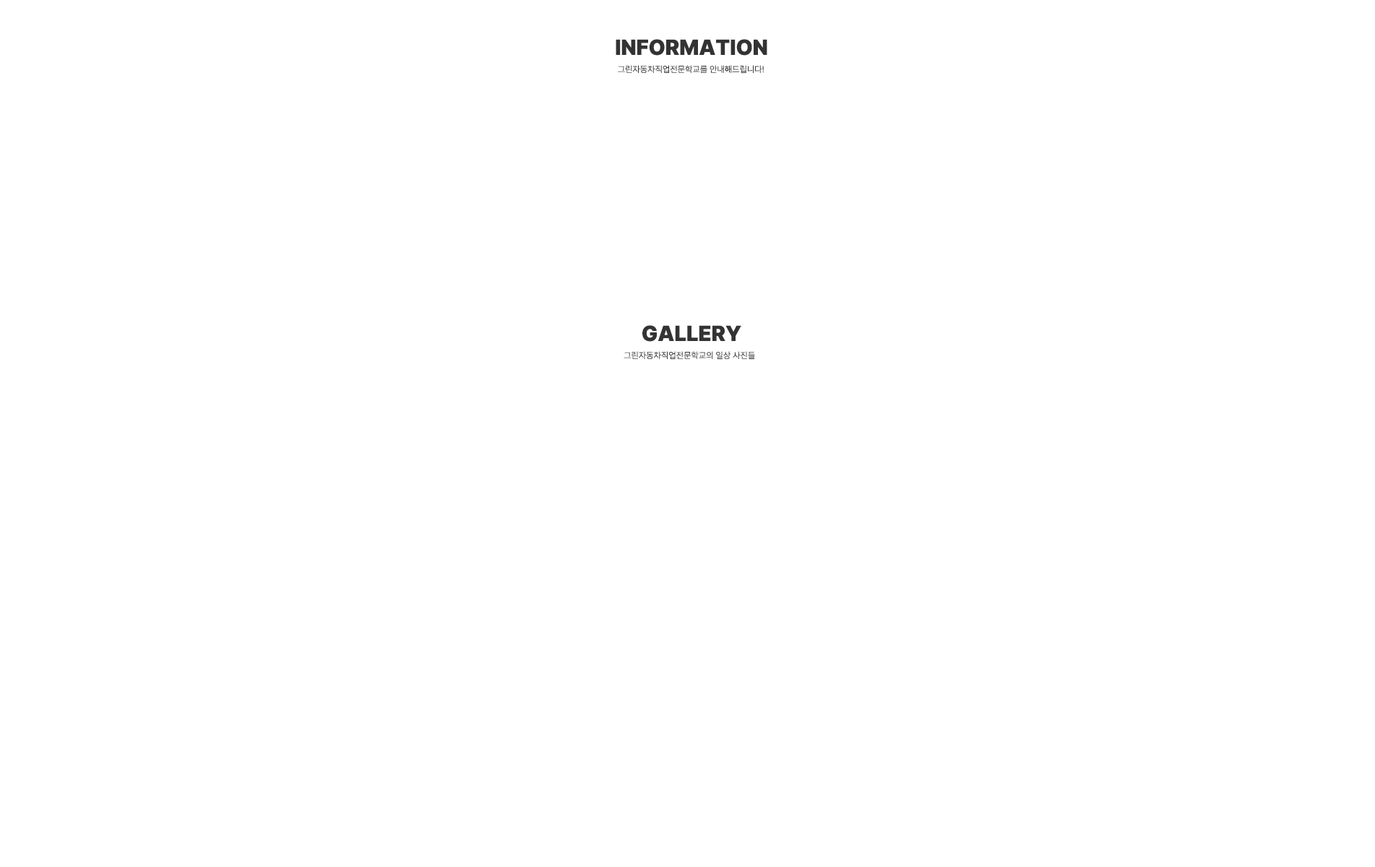
<style>
.page{position:relative;width:1375px;height:867px;background:#ffffff}
.page>*{position:absolute;margin:0}
.t1{font:21.7px "Pretendard-Black";color:#333333}
.t2{font:8.7px "Pretendard-Light";color:#333333}
</style>
<div class="page">
<p class="t1" style="left:616px;top:39px;width:151px;height:17px">INFORMATION</p>
<p class="t2" style="left:618px;top:65px;width:146px;height:8px">그린자동차직업전문학교를 안내해드립니다!</p>
<p class="t1" style="left:642px;top:325px;width:99px;height:17px">GALLERY</p>
<p class="t2" style="left:624px;top:351px;width:131px;height:8px">그린자동차직업전문학교의 일상 사진들</p>
</div>
